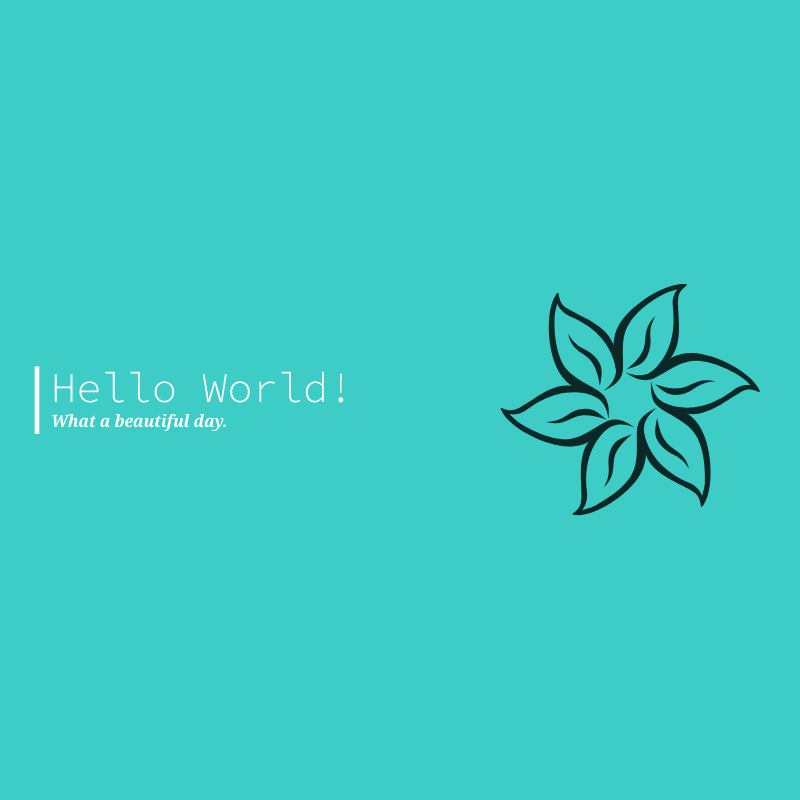
<style>
.page{position:relative;width:800px;height:800px;background:#3dccc6}
.page>*{position:absolute;margin:0}
.t1{font:42px "SourceCodePro-Light";color:#ffffff}
.t2{font:17px "NotoSerif-SemiCondensedBoldItalic";color:#ffffff}
</style>
<div class="page">
<p class="t1" style="left:54px;top:371px;width:290px;height:32px">Hello World!</p>
<p class="t2" style="left:52px;top:413px;width:174px;height:19px">What a beautiful day.</p>
</div>
